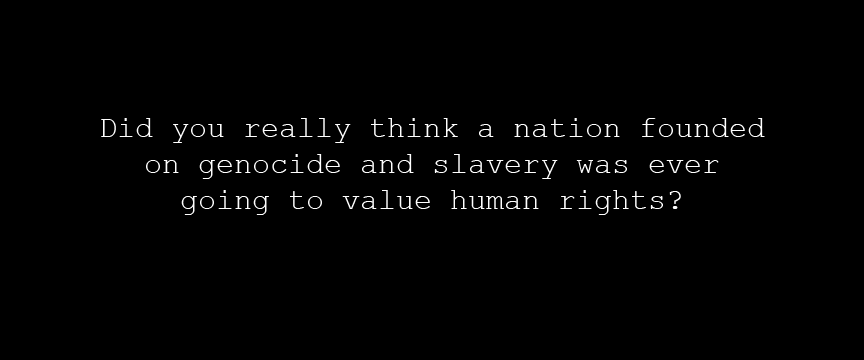
<style>
.page{position:relative;width:864px;height:360px;background:#000000}
.page>*{position:absolute;margin:0}
.t1{font:30px "CourierNewPSMT";color:#ffffff}
</style>
<div class="page">
<p class="t1" style="left:101px;top:118px;width:664px;height:97px;text-align:center">Did you really think a nation founded<br>on genocide and slavery was ever<br>going to value human rights?</p>
</div>
